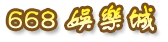
<style>
.page{position:relative;width:168px;height:42px;background:#ffffff}
.page>*{position:absolute;margin:0}
.t1{font:30px "FZSTK--GBK1-0";font-weight:bold}
</style>
<div class="page">
<p class="t1" style="left:8px;top:5px;width:146px;height:26px">668 娛樂城</p>
</div>
